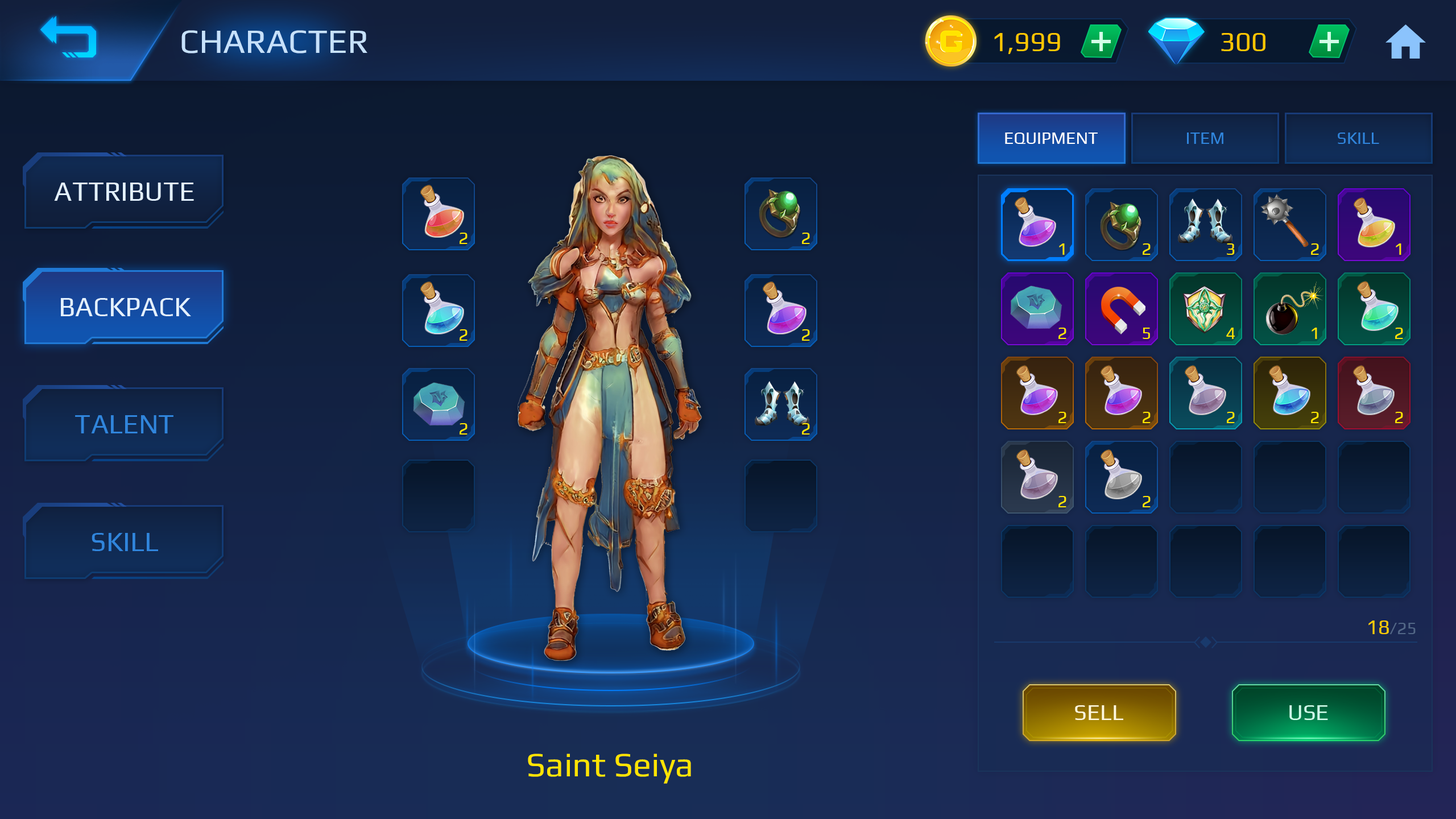
<style>
.page{position:relative;width:1456px;height:819px}
.page>*{position:absolute;margin:0}
.t1{font:34.1px "Play-Regular";color:#c6e1fc}
.t2{font:27.3px "Play-Regular";color:#ffc600}
.t3{font:17.1px "Play-Regular";color:#ffffff}
.t4{font:17.1px "Play-Regular";color:#3085dc}
.t5{font:27.3px "Play-Regular";color:#e3f1ff}
.t6{font:17.1px "Play-Regular";color:#ffe400}
.t7{font:27.3px "Play-Regular";color:#3085dc}
.t8{font:17.1px "Play-Regular";color:#526787}
.t9{font:20.5px "Play-Regular";color:#ffcc00}
.t10{font:22.7px "Play-Regular";color:#fff8db}
.t11{font:22.7px "Play-Regular";color:#ceffea}
.t12{font:34.1px "Play-Regular";color:#ffe400}
</style>
<div class="page">
<p class="t1" style="left:181px;top:30px;width:186px;height:23px">CHARACTER</p>
<p class="t2" style="left:994px;top:33px;width:66px;height:21px">1,999</p>
<p class="t2" style="left:1221px;top:33px;width:44px;height:18px">300</p>
<p class="t3" style="left:1005px;top:133px;width:93px;height:11px">EQUIPMENT</p>
<p class="t3" style="left:1005px;top:133px;width:93px;height:11px">EQUIPMENT</p>
<p class="t4" style="left:1187px;top:133px;width:36px;height:11px">ITEM</p>
<p class="t4" style="left:1338px;top:133px;width:41px;height:11px">SKILL</p>
<p class="t5" style="left:54px;top:183px;width:140px;height:18px">ATTRIBUTE</p>
<p class="t6" style="left:460px;top:233px;width:8px;height:11px">2</p>
<p class="t6" style="left:802px;top:233px;width:8px;height:11px">2</p>
<p class="t6" style="left:1059px;top:243px;width:6px;height:12px">1</p>
<p class="t6" style="left:1143px;top:243px;width:8px;height:12px">2</p>
<p class="t6" style="left:1227px;top:243px;width:8px;height:12px">3</p>
<p class="t6" style="left:1311px;top:243px;width:8px;height:12px">2</p>
<p class="t6" style="left:1396px;top:243px;width:5px;height:12px">1</p>
<p class="t5" style="left:61px;top:298px;width:130px;height:18px">BACKPACK</p>
<p class="t6" style="left:460px;top:329px;width:8px;height:12px">2</p>
<p class="t6" style="left:802px;top:329px;width:8px;height:12px">2</p>
<p class="t6" style="left:1058px;top:328px;width:8px;height:11px">2</p>
<p class="t6" style="left:1143px;top:328px;width:7px;height:11px">5</p>
<p class="t6" style="left:1226px;top:328px;width:9px;height:11px">4</p>
<p class="t6" style="left:1312px;top:328px;width:5px;height:11px">1</p>
<p class="t6" style="left:1395px;top:328px;width:8px;height:11px">2</p>
<p class="t6" style="left:1058px;top:412px;width:8px;height:11px">2</p>
<p class="t6" style="left:1143px;top:412px;width:8px;height:11px">2</p>
<p class="t6" style="left:1227px;top:412px;width:8px;height:11px">2</p>
<p class="t6" style="left:1311px;top:412px;width:8px;height:11px">2</p>
<p class="t6" style="left:1395px;top:412px;width:8px;height:11px">2</p>
<p class="t7" style="left:75px;top:415px;width:98px;height:18px">TALENT</p>
<p class="t6" style="left:460px;top:423px;width:8px;height:12px">2</p>
<p class="t6" style="left:802px;top:423px;width:8px;height:12px">2</p>
<p class="t6" style="left:1058px;top:496px;width:8px;height:11px">2</p>
<p class="t6" style="left:1143px;top:496px;width:8px;height:11px">2</p>
<p class="t7" style="left:92px;top:533px;width:66px;height:18px">SKILL</p>
<p class="t8" style="left:1368px;top:620px;width:48px;height:14px"><span class="t9">18</span>/25</p>
<p class="t10" style="left:1075px;top:705px;width:48px;height:15px">SELL</p>
<p class="t11" style="left:1289px;top:705px;width:39px;height:15px">USE</p>
<p class="t12" style="left:528px;top:754px;width:163px;height:30px">Saint Seiya</p>
</div>
